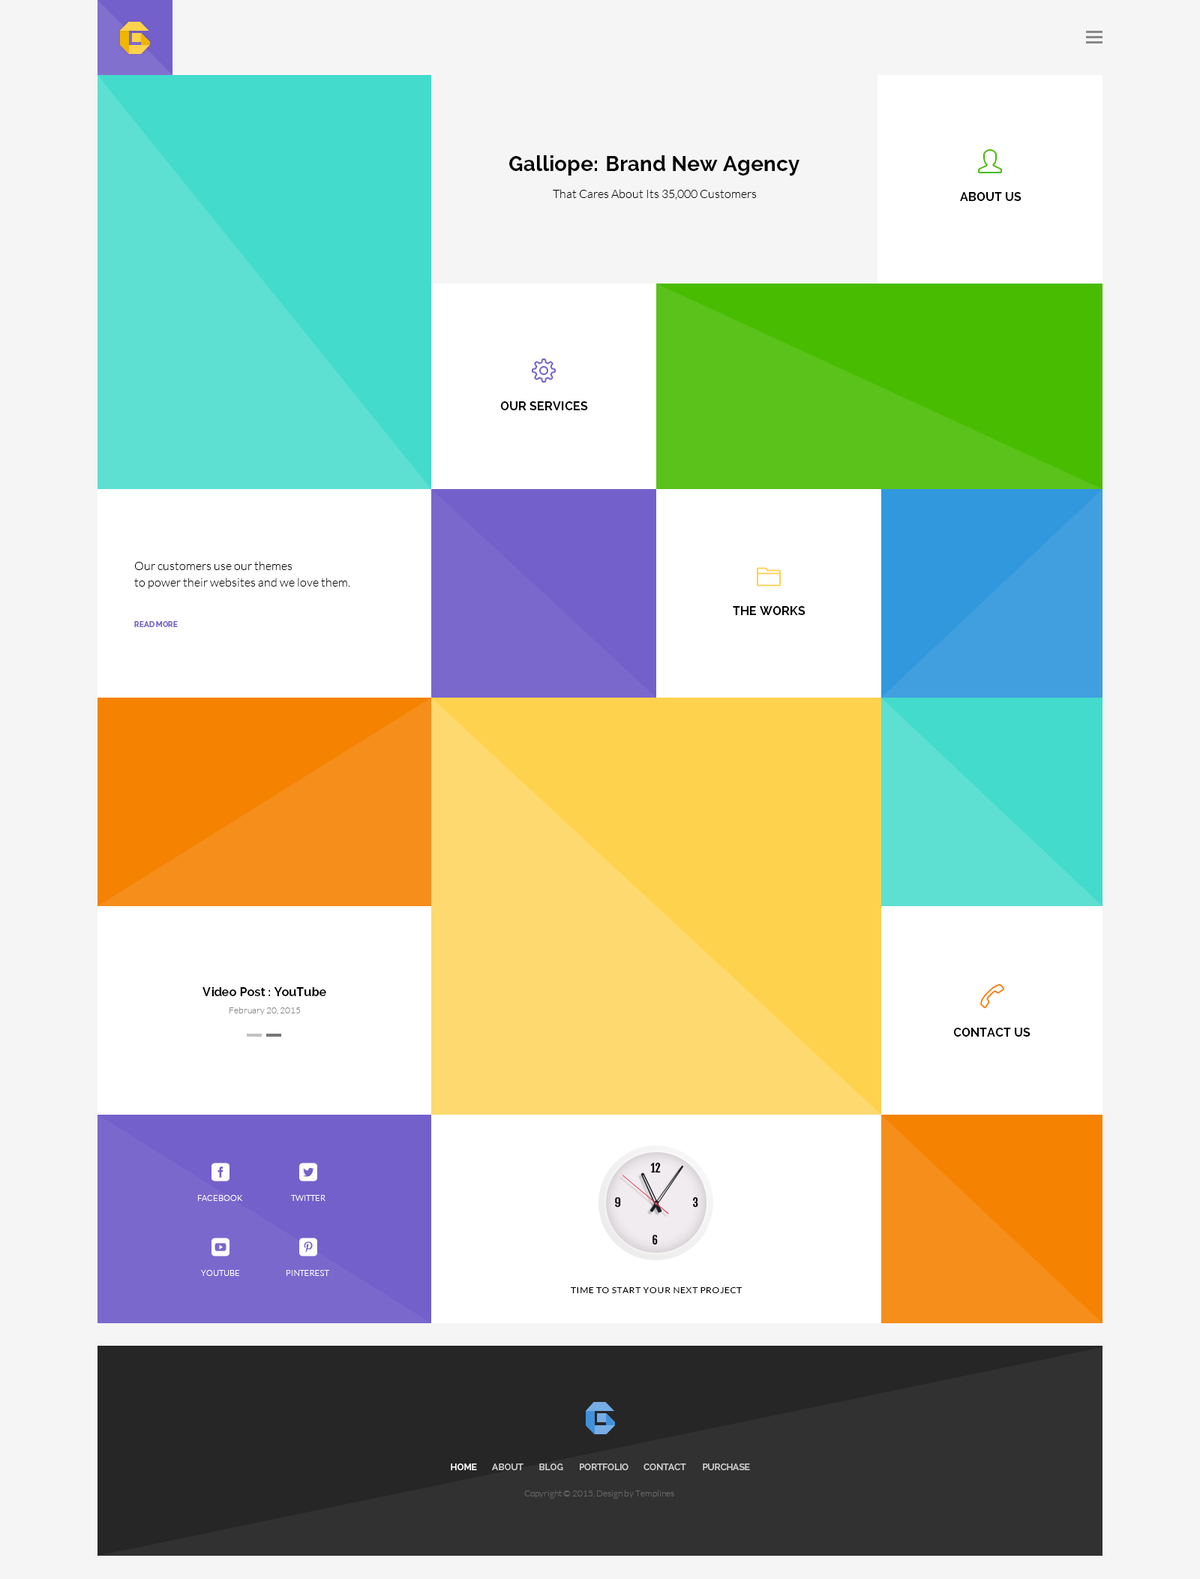
<style>
.page{position:relative;width:1200px;height:1579px;background:#f5f5f5}
.page>*{position:absolute;margin:0}
.t1{font:21px "Raleway-Bold";color:#000000}
.t2{font:12px "Lato-Light";color:#000000}
.t3{font:12px "Raleway-Bold";color:#000000}
.t4{font:12px/16.5px "Lato-Light";color:#000000}
.t5{font:7.5px "Raleway-Bold";color:#7460ca}
.t6{font:9px "Lato-Light";color:#888888}
.t7{font:11.2px "FjallaOne";color:#000000;font-weight:bold}
.t8{font:8.2px "Lato-Light";color:#fefefe;text-transform:uppercase}
.t9{font:9px "Lato-Regular";letter-spacing:0.05em;color:#000000;text-transform:uppercase}
.t10{font:9px "Raleway-SemiBold";color:#ffffff}
.t11{font:9px "Raleway-SemiBold";color:#cccccc}
.t12{font:9px "Lato-Light";color:#666666}
</style>
<div class="page">
<p class="t1" style="left:509px;top:155px;width:291px;height:21px">Galliope: Brand New Agency</p>
<p class="t2" style="left:553px;top:189px;width:204px;height:11px">That Cares About Its 35,000 Customers</p>
<p class="t3" style="left:960px;top:192px;width:62px;height:9px">ABOUT US</p>
<p class="t3" style="left:500px;top:401px;width:88px;height:9px">OUR SERVICES</p>
<p class="t4" style="left:134px;top:561px;width:216px;height:28px">Our customers use our themes<br>to power their websites and we love them.</p>
<p class="t3" style="left:733px;top:606px;width:73px;height:9px">THE WORKS</p>
<p class="t5" style="left:134px;top:621px;width:44px;height:6px">READ MORE</p>
<p class="t3" style="left:202px;top:987px;width:124px;height:9px">Video Post : YouTube</p>
<p class="t6" style="left:230px;top:1006px;width:71px;height:9px">February 20, 2015</p>
<p class="t3" style="left:953px;top:1028px;width:77px;height:8px">CONTACT US</p>
<p class="t7" style="left:650px;top:1162px;width:11px;height:11px">12</p>
<p class="t8" style="left:198px;top:1195px;width:45px;height:6px">FACEBOOK</p>
<p class="t8" style="left:291px;top:1195px;width:35px;height:6px">TWITTER</p>
<p class="t7" style="left:615px;top:1197px;width:6px;height:11px">9</p>
<p class="t7" style="left:693px;top:1197px;width:5px;height:11px">3</p>
<p class="t7" style="left:652px;top:1234px;width:6px;height:11px">6</p>
<p class="t8" style="left:201px;top:1270px;width:38px;height:6px">YOUTUBE</p>
<p class="t8" style="left:286px;top:1270px;width:6px;height:6px">PI</p>
<p class="t8" style="left:294px;top:1270px;width:35px;height:6px">nterest</p>
<p class="t9" style="left:571px;top:1287px;width:171px;height:6px">Time To Start Your Next Project</p>
<p class="t10" style="left:451px;top:1463px;width:26px;height:7px">HOME</p>
<p class="t11" style="left:492px;top:1463px;width:32px;height:7px">ABOUT</p>
<p class="t11" style="left:539px;top:1463px;width:24px;height:7px">BLOG</p>
<p class="t11" style="left:580px;top:1463px;width:48px;height:7px">PORTFOLIO</p>
<p class="t11" style="left:644px;top:1463px;width:42px;height:7px">CONTACT</p>
<p class="t11" style="left:703px;top:1463px;width:47px;height:7px">PURCHASE</p>
<p class="t12" style="left:524px;top:1490px;width:150px;height:8px">Copyright © 2015. Design by Templines</p>
</div>
